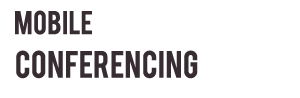
<style>
.page{position:relative;width:300px;height:98px;background:#ffffff}
.page>*{position:absolute;margin:0}
.t1{font:26px "Bebas";color:#362c32}
.t2{font:30px "Bebas";color:#362c32}
</style>
<div class="page">
<p class="t1" style="left:15px;top:10px;width:77px;height:25px">MObile</p>
<p class="t2" style="left:16px;top:50px;width:182px;height:29px">Conferencing</p>
</div>
